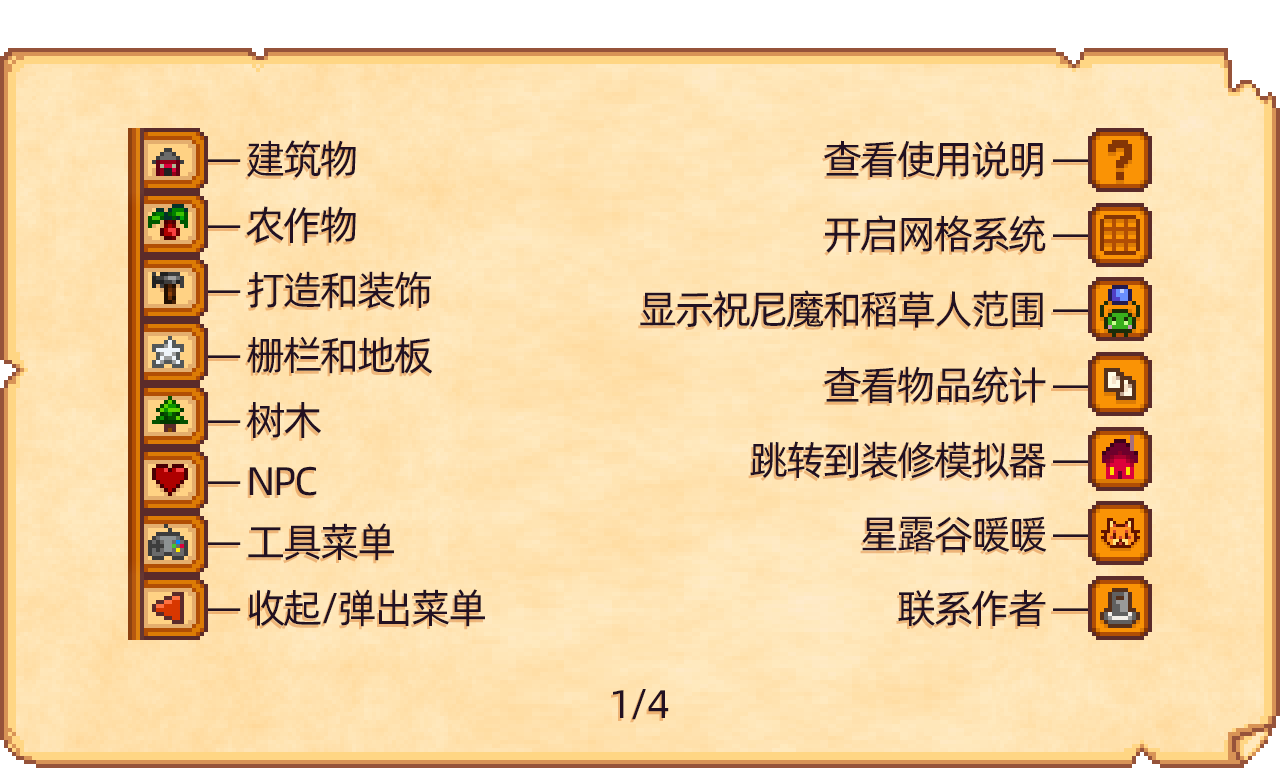
<style>
.page{position:relative;width:1280px;height:768px}
.page>*{position:absolute;margin:0}
.t1{font:40px "AlibabaPuHuiTi-Regular";letter-spacing:-0.06em;color:#221122}
</style>
<div class="page">
<p class="t1" style="left:201px;top:140px;width:155px;height:38px">— 建筑物</p>
<p class="t1" style="left:824px;top:140px;width:268px;height:38px">查看使用说明 —</p>
<p class="t1" style="left:201px;top:206px;width:155px;height:37px">— 农作物</p>
<p class="t1" style="left:825px;top:215px;width:267px;height:38px">开启网格系统 —</p>
<p class="t1" style="left:201px;top:271px;width:230px;height:38px">— 打造和装饰</p>
<p class="t1" style="left:640px;top:290px;width:452px;height:38px">显示祝尼魔和稻草人范围 —</p>
<p class="t1" style="left:201px;top:336px;width:231px;height:38px">— 栅栏和地板</p>
<p class="t1" style="left:824px;top:366px;width:268px;height:38px">查看物品统计 —</p>
<p class="t1" style="left:201px;top:402px;width:120px;height:36px">— 树木</p>
<p class="t1" style="left:750px;top:441px;width:342px;height:38px">跳转到装修模拟器 —</p>
<p class="t1" style="left:201px;top:466px;width:116px;height:30px">— NPC</p>
<p class="t1" style="left:862px;top:516px;width:230px;height:37px">星露谷暖暖 —</p>
<p class="t1" style="left:201px;top:523px;width:193px;height:38px">— 工具菜单</p>
<p class="t1" style="left:201px;top:589px;width:284px;height:38px">— 收起/弹出菜单</p>
<p class="t1" style="left:898px;top:589px;width:194px;height:37px">联系作者 —</p>
<p class="t1" style="left:613px;top:689px;width:56px;height:31px">1/4</p>
</div>
